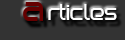
<style>
.page{position:relative;width:125px;height:40px;background:#333333}
.page>*{position:absolute;margin:0}
.t1{font:20px "BirdmanBold";color:#ffffff}
.t2{font:11px "BirdmanBold";color:#650000}
.t3{font:30px "BirdmanBold";color:#650000}
</style>
<div class="page">
<p class="t1" style="left:23px;top:2px;width:94px;height:19px"><span class="t2">   </span><span class="t3">A    </span>rticles</p>
</div>
